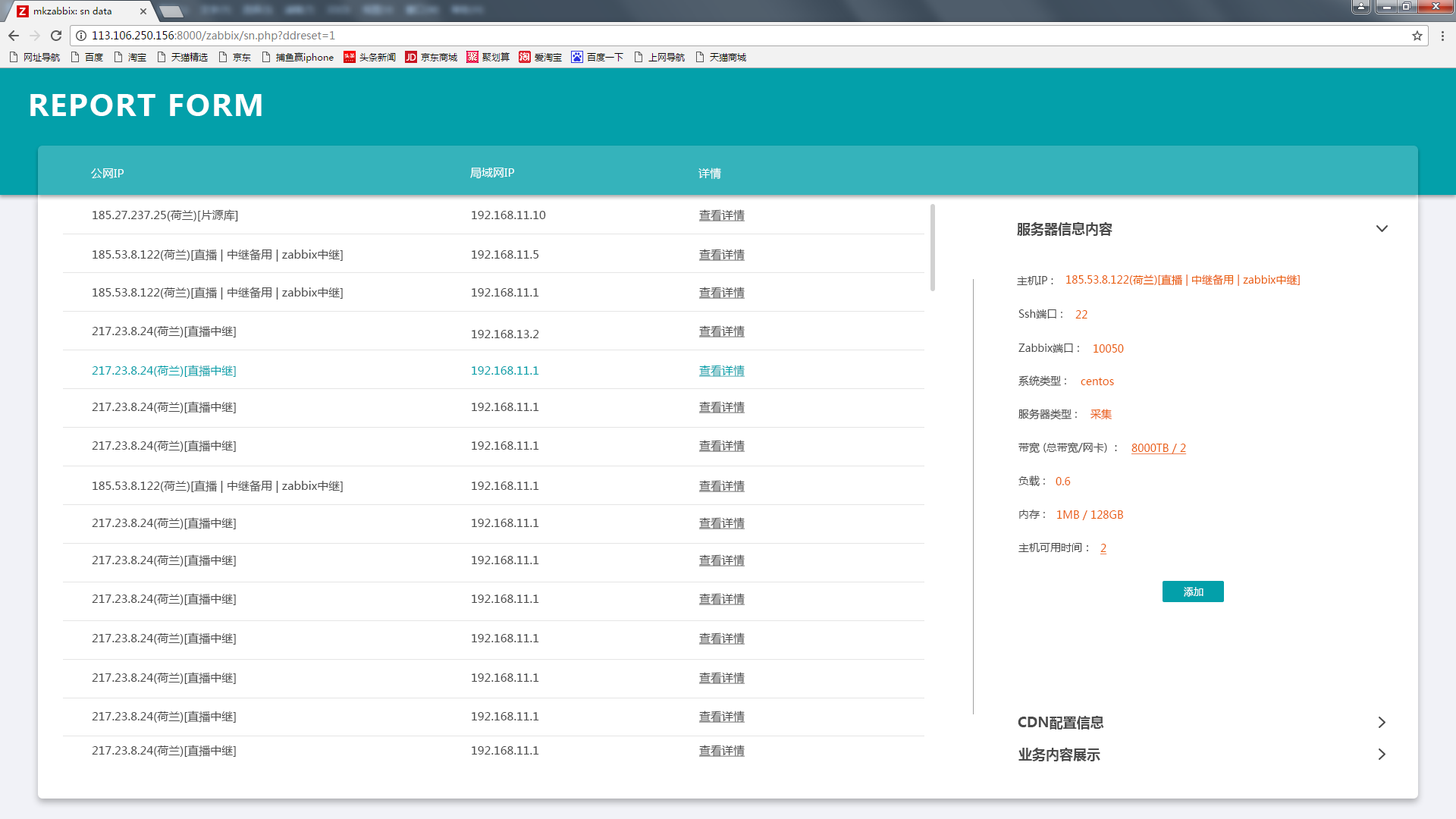
<style>
.page{position:relative;width:1456px;height:819px;background:#ffffff}
.page>*{position:absolute;margin:0}
.t1{font:29.1px "MicrosoftYaHei-Bold";letter-spacing:0.05em;color:#ffffff;text-transform:uppercase}
.t2{font:11.4px "MicrosoftYaHei";color:#ffffff}
.t3{font:11.4px "MicrosoftYaHei";color:#4b4b4b}
.t4{font:11.4px "MicrosoftYaHei";color:#4b4b4b;text-decoration:underline}
.t5{font:13.6px "MicrosoftYaHei-Bold";color:#4a4a4a}
.t6{font:10.6px "MicrosoftYaHei";color:#4a4a4a}
.t7{font:10.6px "MicrosoftYaHei";color:#ea5e09}
.t8{font:11.4px "MicrosoftYaHei";color:#03a0aa}
.t9{font:11.4px "MicrosoftYaHei";color:#03a0aa;text-decoration:underline}
.t10{font:10.6px "MicrosoftYaHei";color:#ea5e09;text-decoration:underline}
.t11{font:9.9px "MicrosoftYaHei";color:#ffffff}
</style>
<div class="page">
<p class="t1" style="left:30px;top:94px;width:232px;height:22px">Report form</p>
<p class="t2" style="left:91px;top:168px;width:33px;height:10px">公网IP</p>
<p class="t2" style="left:470px;top:168px;width:45px;height:11px">局域网IP</p>
<p class="t2" style="left:698px;top:168px;width:23px;height:11px">详情</p>
<p class="t3" style="left:93px;top:209px;width:145px;height:12px">185.27.237.25(荷兰)[片源库]</p>
<p class="t4" style="left:699px;top:209px;width:46px;height:12px">查看详情</p>
<p class="t3" style="left:472px;top:211px;width:74px;height:8px">192.168.11.10</p>
<p class="t5" style="left:1017px;top:222px;width:95px;height:14px">服务器信息内容</p>
<p class="t3" style="left:93px;top:249px;width:250px;height:13px">185.53.8.122(荷兰)[直播 | 中继备用 | zabbix中继]</p>
<p class="t3" style="left:472px;top:250px;width:67px;height:9px">192.168.11.5</p>
<p class="t4" style="left:699px;top:249px;width:46px;height:12px">查看详情</p>
<p class="t6" style="left:1017px;top:276px;width:36px;height:9px">主机IP :</p>
<p class="t7" style="left:1066px;top:275px;width:234px;height:11px">185.53.8.122(荷兰)[直播 | 中继备用 | zabbix中继]</p>
<p class="t3" style="left:93px;top:287px;width:250px;height:13px">185.53.8.122(荷兰)[直播 | 中继备用 | zabbix中继]</p>
<p class="t3" style="left:472px;top:288px;width:67px;height:9px">192.168.11.1</p>
<p class="t4" style="left:699px;top:287px;width:46px;height:12px">查看详情</p>
<p class="t6" style="left:1018px;top:309px;width:44px;height:9px">Ssh端口 :</p>
<p class="t7" style="left:1075px;top:310px;width:12px;height:8px">22</p>
<p class="t3" style="left:92px;top:325px;width:144px;height:12px">217.23.8.24(荷兰)[直播中继]</p>
<p class="t3" style="left:472px;top:330px;width:67px;height:8px">192.168.13.2</p>
<p class="t4" style="left:699px;top:325px;width:46px;height:12px">查看详情</p>
<p class="t6" style="left:1018px;top:344px;width:61px;height:9px">Zabbix端口 :</p>
<p class="t7" style="left:1094px;top:344px;width:30px;height:9px">10050</p>
<p class="t8" style="left:92px;top:365px;width:144px;height:12px">217.23.8.24(荷兰)[直播中继]</p>
<p class="t9" style="left:699px;top:365px;width:46px;height:12px">查看详情</p>
<p class="t8" style="left:472px;top:366px;width:67px;height:9px">192.168.11.1</p>
<p class="t6" style="left:1018px;top:375px;width:48px;height:12px">系统类型 :</p>
<p class="t7" style="left:1081px;top:378px;width:33px;height:7px">centos</p>
<p class="t3" style="left:92px;top:401px;width:144px;height:12px">217.23.8.24(荷兰)[直播中继]</p>
<p class="t4" style="left:699px;top:401px;width:46px;height:12px">查看详情</p>
<p class="t3" style="left:472px;top:403px;width:67px;height:8px">192.168.11.1</p>
<p class="t6" style="left:1018px;top:409px;width:59px;height:11px">服务器类型 :</p>
<p class="t7" style="left:1090px;top:409px;width:22px;height:11px">采集</p>
<p class="t3" style="left:92px;top:440px;width:144px;height:12px">217.23.8.24(荷兰)[直播中继]</p>
<p class="t3" style="left:472px;top:441px;width:67px;height:9px">192.168.11.1</p>
<p class="t4" style="left:699px;top:440px;width:46px;height:12px">查看详情</p>
<p class="t6" style="left:1018px;top:442px;width:99px;height:11px">带宽 (总带宽/网卡) ：</p>
<p class="t10" style="left:1131px;top:444px;width:56px;height:10px">8000TB / 2</p>
<p class="t3" style="left:93px;top:480px;width:250px;height:13px">185.53.8.122(荷兰)[直播 | 中继备用 | zabbix中继]</p>
<p class="t3" style="left:472px;top:482px;width:67px;height:8px">192.168.11.1</p>
<p class="t4" style="left:699px;top:480px;width:46px;height:12px">查看详情</p>
<p class="t6" style="left:1018px;top:475px;width:27px;height:11px">负载 :</p>
<p class="t7" style="left:1056px;top:477px;width:15px;height:8px">0.6</p>
<p class="t6" style="left:1019px;top:510px;width:26px;height:9px">内存 :</p>
<p class="t3" style="left:92px;top:517px;width:144px;height:12px">217.23.8.24(荷兰)[直播中继]</p>
<p class="t3" style="left:472px;top:519px;width:67px;height:8px">192.168.11.1</p>
<p class="t4" style="left:699px;top:517px;width:46px;height:12px">查看详情</p>
<p class="t7" style="left:1057px;top:510px;width:66px;height:10px">1MB / 128GB</p>
<p class="t6" style="left:1018px;top:543px;width:70px;height:9px">主机可用时间：</p>
<p class="t10" style="left:1100px;top:544px;width:7px;height:10px">2</p>
<p class="t3" style="left:92px;top:554px;width:144px;height:12px">217.23.8.24(荷兰)[直播中继]</p>
<p class="t3" style="left:472px;top:556px;width:67px;height:8px">192.168.11.1</p>
<p class="t4" style="left:699px;top:554px;width:46px;height:12px">查看详情</p>
<p class="t3" style="left:92px;top:593px;width:144px;height:12px">217.23.8.24(荷兰)[直播中继]</p>
<p class="t4" style="left:699px;top:593px;width:46px;height:12px">查看详情</p>
<p class="t11" style="left:1184px;top:587px;width:19px;height:10px">添加</p>
<p class="t3" style="left:472px;top:595px;width:67px;height:8px">192.168.11.1</p>
<p class="t3" style="left:92px;top:632px;width:144px;height:13px">217.23.8.24(荷兰)[直播中继]</p>
<p class="t3" style="left:472px;top:634px;width:67px;height:8px">192.168.11.1</p>
<p class="t4" style="left:699px;top:632px;width:46px;height:13px">查看详情</p>
<p class="t3" style="left:92px;top:672px;width:144px;height:12px">217.23.8.24(荷兰)[直播中继]</p>
<p class="t3" style="left:472px;top:673px;width:67px;height:9px">192.168.11.1</p>
<p class="t4" style="left:699px;top:672px;width:46px;height:12px">查看详情</p>
<p class="t3" style="left:92px;top:711px;width:144px;height:12px">217.23.8.24(荷兰)[直播中继]</p>
<p class="t3" style="left:472px;top:712px;width:67px;height:8px">192.168.11.1</p>
<p class="t4" style="left:699px;top:711px;width:46px;height:12px">查看详情</p>
<p class="t5" style="left:1018px;top:716px;width:86px;height:14px">CDN配置信息</p>
<p class="t3" style="left:92px;top:745px;width:144px;height:12px">217.23.8.24(荷兰)[直播中继]</p>
<p class="t3" style="left:472px;top:746px;width:67px;height:9px">192.168.11.1</p>
<p class="t4" style="left:699px;top:745px;width:46px;height:12px">查看详情</p>
<p class="t5" style="left:1018px;top:748px;width:82px;height:13px">业务内容展示</p>
</div>
